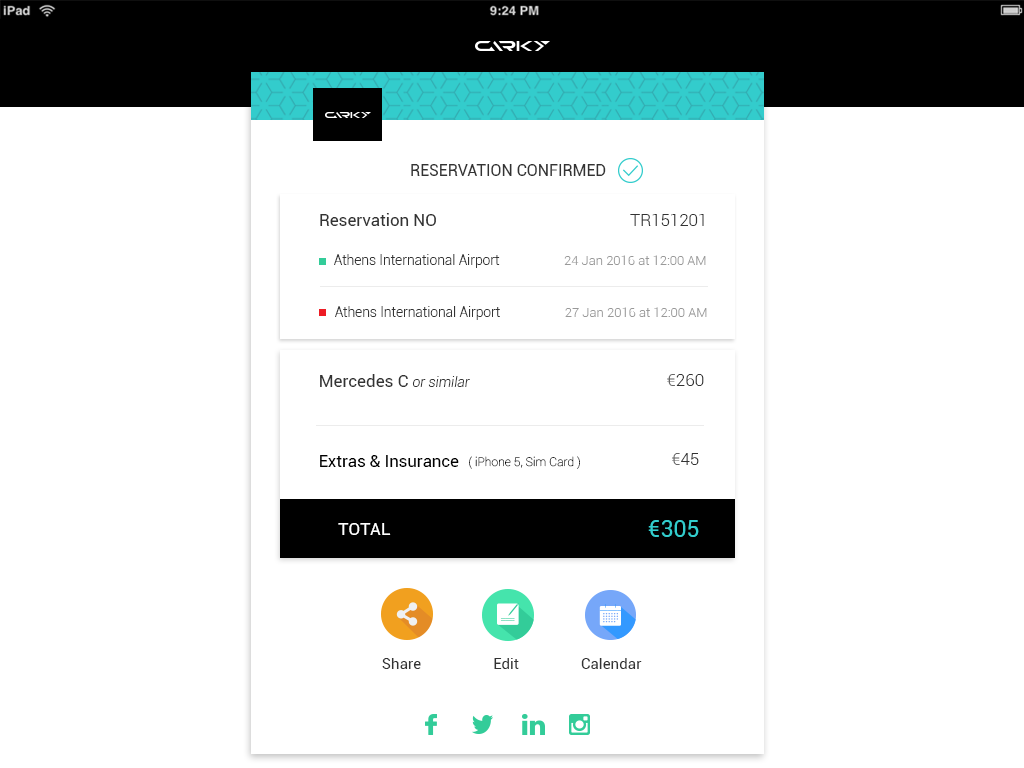
<style>
.page{position:relative;width:1024px;height:768px;background:#ffffff}
.page>*{position:absolute;margin:0}
.t1{font:16px "Roboto-Regular";color:#333333}
.t2{font:16.9px "Roboto-Regular";color:#333333}
.t3{font:16.9px "Roboto-Light";color:#333333}
.t4{font:13.7px "Roboto-Light";color:#333333}
.t5{font:13px "Roboto-Light";color:#999999}
.t6{font:17.1px "Roboto-Regular";color:#333333}
.t7{font:14px "Roboto-LightItalic";color:#333333}
.t8{font:17.1px "Roboto-Light";color:#333333}
.t9{font:17.1px "Roboto-Light";color:#666666}
.t10{font:16.6px "Roboto-Regular";letter-spacing:0.005em;color:#000000}
.t11{font:12px "Roboto-Thin";letter-spacing:0.005em;color:#000000}
.t12{font:23.3px "Roboto-Regular";color:#33cccc}
.t13{font:17.4px "Roboto-Regular";color:#ffffff}
.t14{font:15px "Roboto-Regular";color:#333333}
</style>
<div class="page">
<p class="t1" style="left:411px;top:164px;width:195px;height:12px">RESERVATION CONFIRMED</p>
<p class="t2" style="left:320px;top:213px;width:116px;height:13px">Reservation NO</p>
<p class="t3" style="left:630px;top:214px;width:74px;height:12px">TR151201</p>
<p class="t4" style="left:334px;top:254px;width:166px;height:14px">Athens International Airport</p>
<p class="t5" style="left:564px;top:255px;width:142px;height:10px">24 Jan 2016 at 12:00 AM</p>
<p class="t4" style="left:335px;top:306px;width:165px;height:14px">Athens International Airport</p>
<p class="t5" style="left:565px;top:307px;width:142px;height:10px">27 Jan 2016 at 12:00 AM</p>
<p class="t6" style="left:320px;top:374px;width:150px;height:13px">Mercedes C <span class="t7">or similar</span></p>
<p class="t8" style="left:667px;top:374px;width:37px;height:12px"><span class="t9">€</span>260</p>
<p class="t10" style="left:320px;top:455px;width:139px;height:12px">Extras &amp; Insurance</p>
<p class="t11" style="left:469px;top:456px;width:111px;height:13px">( iPhone 5, Sim Card )</p>
<p class="t8" style="left:672px;top:453px;width:27px;height:12px"><span class="t9">€</span>45</p>
<p class="t12" style="left:648px;top:520px;width:51px;height:17px">€305</p>
<p class="t13" style="left:338px;top:523px;width:53px;height:12px">TOTAL</p>
<p class="t14" style="left:382px;top:658px;width:39px;height:11px">Share</p>
<p class="t14" style="left:494px;top:658px;width:25px;height:11px">Edit</p>
<p class="t14" style="left:581px;top:658px;width:61px;height:11px">Calendar</p>
</div>
